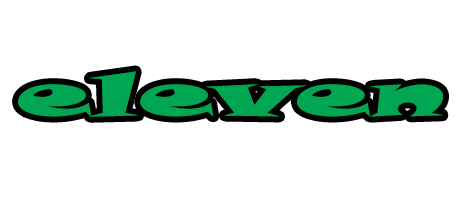
<style>
.page{position:relative;width:462px;height:199px;background:#ffffff}
.page>*{position:absolute;margin:0}
.t1{font:60px "SnapITC-Regular";color:#00a651;scale:2 1}
</style>
<div class="page">
<p class="t1" style="left:18px;top:71px;width:425px;height:46px">eleven</p>
</div>
